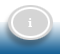
<style>
.page{position:relative;width:60px;height:54px;background:#d5d5d5}
.page>*{position:absolute;margin:0}
.t1{font:11px "Georgia-Bold";letter-spacing:0.099em;color:#ffffff}
</style>
<div class="page">
<p class="t1" style="left:28px;top:18px;width:4px;height:9px">i</p>
</div>
